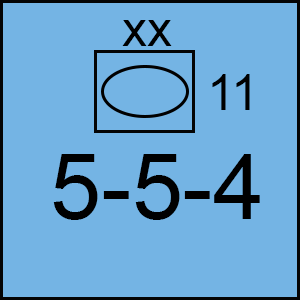
<style>
.page{position:relative;width:300px;height:300px;background:#74b4e4}
.page>*{position:absolute;margin:0}
.t1{font:50px "ArialMT";color:#000000}
.t2{font:91.7px "ArialMT";color:#000000}
</style>
<div class="page">
<p class="t1" style="left:122px;top:20px;width:50px;height:26px">xx</p>
<p class="t1" style="left:212px;top:74px;width:38px;height:36px">11</p>
<p class="t2" style="left:53px;top:154px;width:207px;height:66px">5-5-4</p>
</div>
